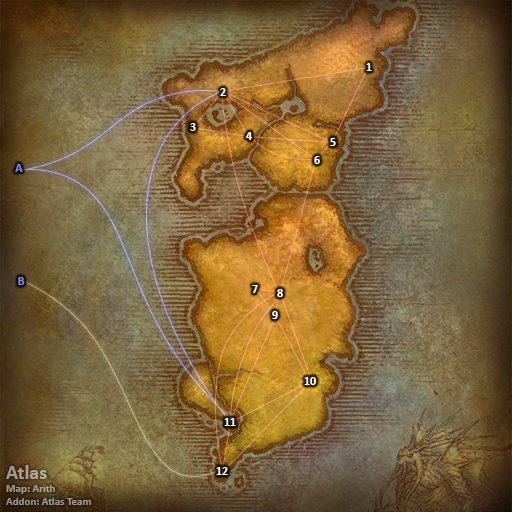
<style>
.page{position:relative;width:512px;height:512px}
.page>*{position:absolute;margin:0}
.t1{font:12px "Calibri-Bold";color:#ffffff}
.t2{font:12px "Calibri-Bold";color:#8788ee}
.t3{font:11px "Calibri-Bold";color:#a59b92}
.t4{font:20px "Calibri-Bold";color:#a59b92}
</style>
<div class="page">
<p class="t1" style="left:366px;top:63px;width:6px;height:8px">1</p>
<p class="t1" style="left:220px;top:88px;width:6px;height:8px">2</p>
<p class="t1" style="left:190px;top:123px;width:6px;height:8px">3</p>
<p class="t1" style="left:246px;top:132px;width:6px;height:8px">4</p>
<p class="t1" style="left:330px;top:138px;width:6px;height:8px">5</p>
<p class="t1" style="left:314px;top:156px;width:6px;height:8px">6</p>
<p class="t2" style="left:15px;top:164px;width:8px;height:8px">A</p>
<p class="t2" style="left:18px;top:277px;width:7px;height:8px">B</p>
<p class="t1" style="left:252px;top:285px;width:6px;height:8px">7</p>
<p class="t1" style="left:277px;top:289px;width:6px;height:8px">8</p>
<p class="t1" style="left:272px;top:311px;width:6px;height:8px">9</p>
<p class="t1" style="left:304px;top:377px;width:12px;height:8px">10</p>
<p class="t1" style="left:224px;top:418px;width:12px;height:8px">11</p>
<p class="t3" style="left:6px;top:465px;width:85px;height:40px"><span class="t4">Atlas<br></span>Map: Arith<br>Addon: Atlas Team</p>
<p class="t1" style="left:216px;top:467px;width:12px;height:8px">12</p>
</div>
